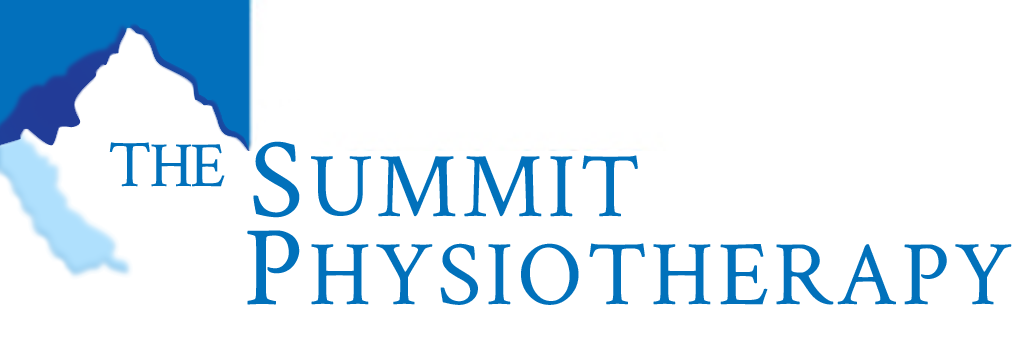
<style>
.page{position:relative;width:1017px;height:343px;background:#ffffff}
.page>*{position:absolute;margin:0}
.t1{font:64.3px "CrimsonText-Roman";letter-spacing:-0.04em;color:#0171bb}
.t2{font:66.7px "CrimsonText-Roman";letter-spacing:-0.04em;color:#0171bb}
.t3{font:92.4px "CrimsonText-Roman";letter-spacing:0.04em;color:#0171bb}
.t4{font:113.7px "CrimsonText-Roman";letter-spacing:0.04em;color:#0171bb}
</style>
<div class="page">
<p class="t1" style="left:109px;top:142px;width:116px;height:45px"><span class="t2">T</span>HE</p>
<p class="t3" style="left:253px;top:141px;width:385px;height:77px"><span class="t4">S</span>UMMIT</p>
<p class="t3" style="left:247px;top:230px;width:765px;height:75px"><span class="t4">P</span>HYSIOTHERAPY</p>
</div>
